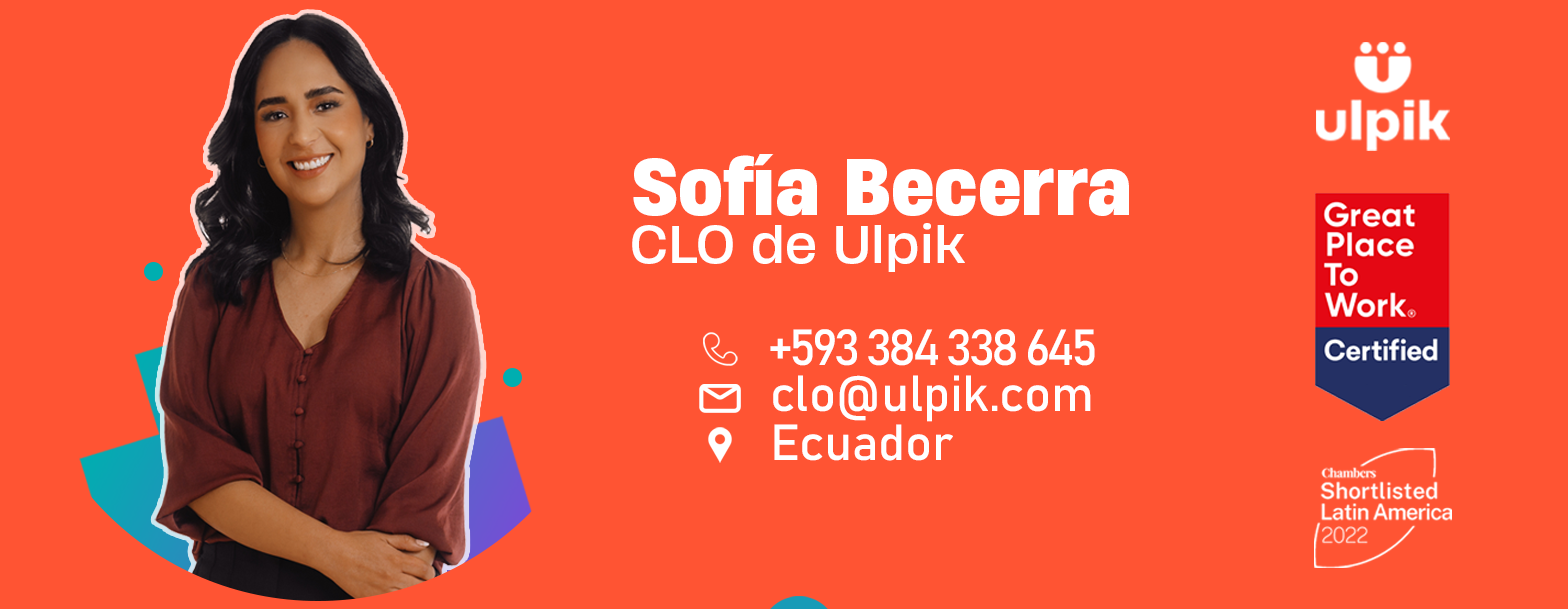
<style>
.page{position:relative;width:1568px;height:609px;background:#ff5433}
.page>*{position:absolute;margin:0}
.t1{font:75px "HeadingNow-66Bold";color:#ffffff}
.t2{font:50px "HeadingNow-74Regular";color:#ffffff}
.t3{font:50px "Bahnschrift";letter-spacing:-0.08em;color:#ffffff}
.t4{font:50px "Bahnschrift";color:#ffffff}
</style>
<div class="page">
<p class="t1" style="left:633px;top:154px;width:496px;height:62px">Sofía Becerra</p>
<p class="t2" style="left:632px;top:223px;width:333px;height:49px">CLO de Ulpik</p>
<p class="t3" style="left:770px;top:329px;width:325px;height:37px">+593 384 338 645</p>
<p class="t4" style="left:773px;top:375px;width:318px;height:47px">clo@ulpik.com</p>
<p class="t4" style="left:774px;top:424px;width:179px;height:37px">Ecuador</p>
</div>
